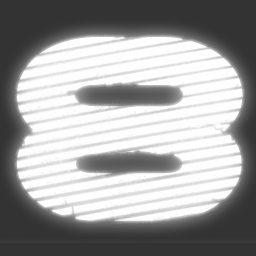
<style>
.page{position:relative;width:256px;height:256px;background:#fefefe}
.page>*{position:absolute;margin:0}
.t1{font:254.7px "Ethnocentric";letter-spacing:0.05em;color:#fefefe;scale:0.89 1}
</style>
<div class="page">
<p class="t1" style="left:17px;top:37px;width:226px;height:184px">8</p>
</div>
